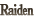
<style>
.page{position:relative;width:34px;height:18px;background:#ffffff}
.page>*{position:absolute;margin:0}
.t1{font:14px "RyuminPro-ExBold";letter-spacing:-0.09em;color:#4a3f32;font-weight:bold;scale:0.8 1}
</style>
<div class="page">
<p class="t1" style="left:0px;top:4px;width:34px;height:12px">Raiden</p>
</div>
